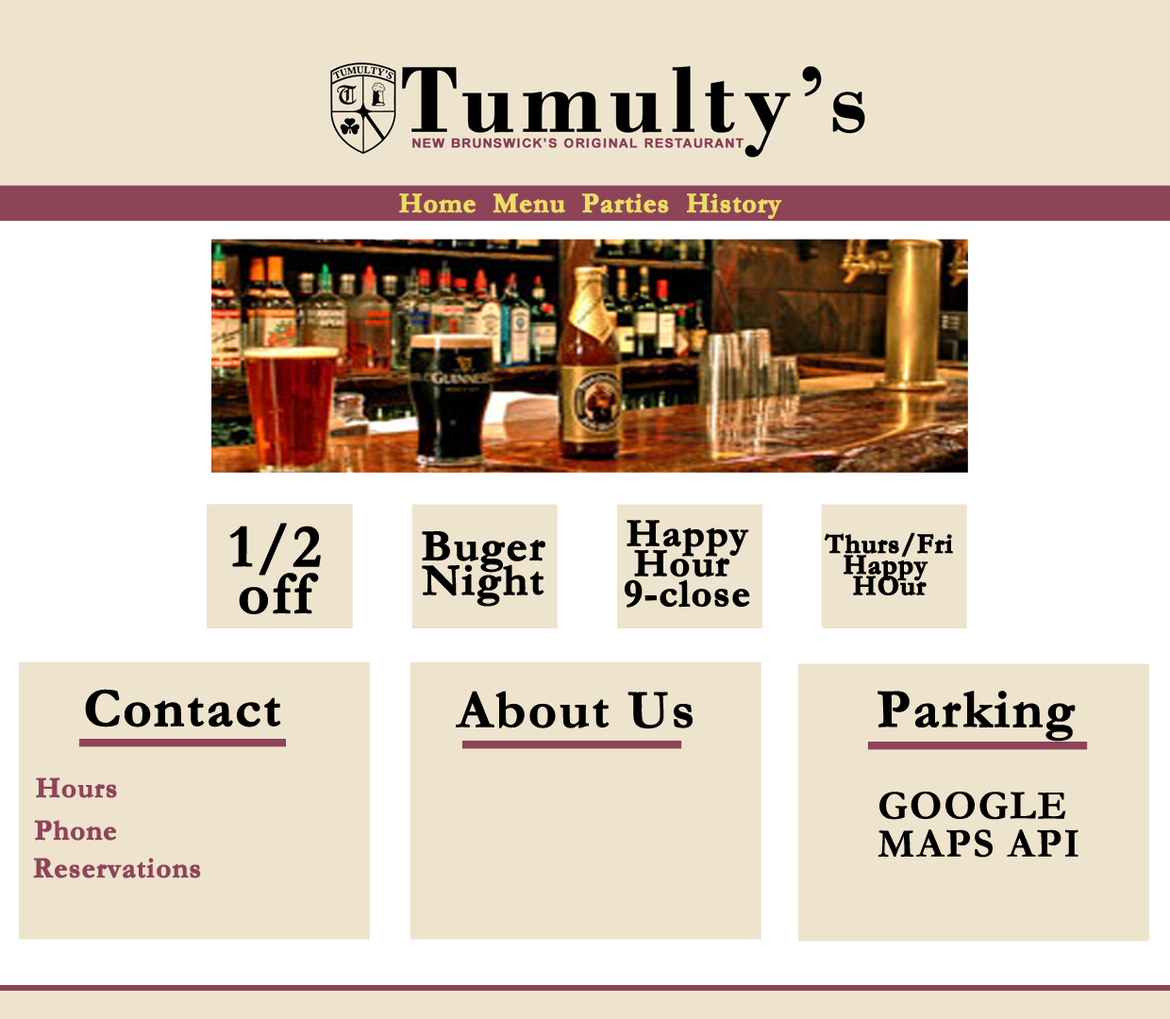
<style>
.page{position:relative;width:1170px;height:1019px;background:#eee3cd}
.page>*{position:absolute;margin:0}
.t1{font:27.1px "Garamond-Bold";letter-spacing:0.02em;color:#ecdd63;font-weight:bold}
.t2{font:39.2px/30px "Garamond-Bold";letter-spacing:0.02em;color:#000000;font-weight:bold}
.t3{font:61.1px/46.8px "Garamond-Bold";letter-spacing:0.02em;color:#000000;font-weight:bold}
.t4{font:44.5px/34.1px "Garamond-Bold";letter-spacing:0.02em;color:#000000;font-weight:bold}
.t5{font:27.1px/20.9px "Garamond-Bold";letter-spacing:0.02em;color:#000000;font-weight:bold}
.t6{font:54.7px "Garamond-Bold";letter-spacing:0.02em;color:#000000;font-weight:bold}
.t7{font:54.6px "Garamond-Bold";letter-spacing:0.02em;color:#000000;font-weight:bold}
.t8{font:28.3px "Garamond-Bold";letter-spacing:0.02em;color:#8d4458;font-weight:bold}
.t9{font:41px/38.1px "Garamond-Bold";letter-spacing:0.02em;color:#000000;font-weight:bold}
</style>
<div class="page">
<p class="t1" style="left:399px;top:193px;width:383px;height:26px">Home  Menu  Parties  History</p>
<p class="t2" style="left:625px;top:520px;width:125px;height:88px;text-align:center">Happy<br>Hour <br>9-close</p>
<p class="t3" style="left:229px;top:523px;width:92px;height:91px;text-align:center">1/2<br>off</p>
<p class="t4" style="left:422px;top:531px;width:123px;height:76px;text-align:center">Buger<br>Night</p>
<p class="t5" style="left:824px;top:532px;width:129px;height:63px;text-align:center">Thurs/Fri<br>Happy <br>HOur</p>
<p class="t6" style="left:85px;top:689px;width:196px;height:39px">Contact</p>
<p class="t7" style="left:456px;top:691px;width:237px;height:38px">About Us</p>
<p class="t7" style="left:878px;top:691px;width:198px;height:51px">Parking</p>
<p class="t8" style="left:36px;top:778px;width:81px;height:20px">Hours</p>
<p class="t9" style="left:879px;top:792px;width:200px;height:66px">GOOGLE <br>MAPS API</p>
<p class="t8" style="left:34px;top:820px;width:82px;height:21px">Phone</p>
<p class="t8" style="left:33px;top:858px;width:168px;height:21px">Reservations</p>
</div>
